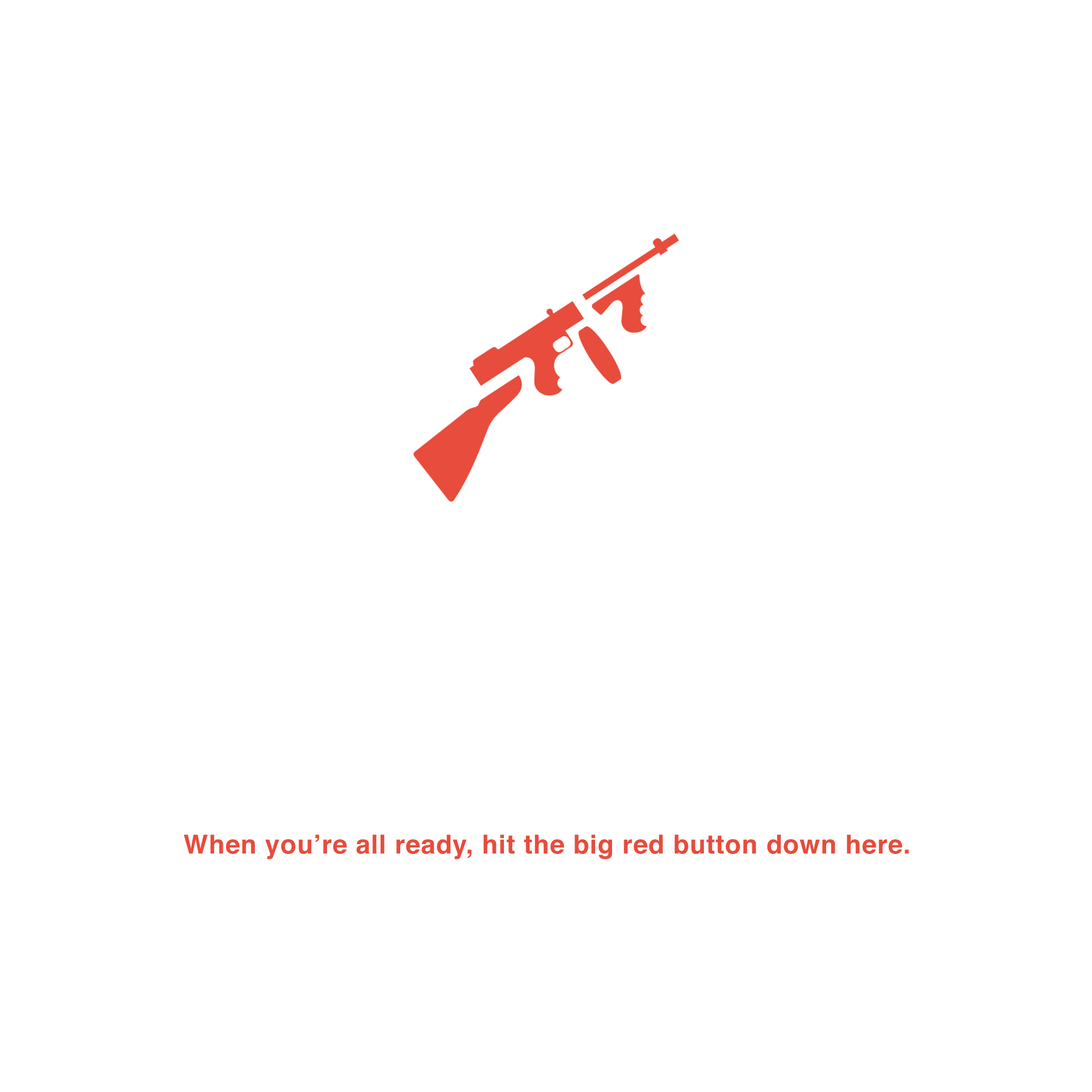
<style>
.page{position:relative;width:1092px;height:1092px;background:#ffffff}
.page>*{position:absolute;margin:0}
.t1{font:26.2px "Helvetica-Bold";letter-spacing:0.025em;color:#e74c3c}
.t2{font:26.2px "Helvetica-Bold";letter-spacing:0.025em;color:#ffffff}
.t3{font:26.2px "Helvetica";letter-spacing:0.025em;color:#ffffff}
</style>
<div class="page">
<p class="t1" style="left:167px;top:614px;width:759px;height:245px;text-align:center"><span class="t2">Stay quiet right now, though.</span><span class="t3"> Don’t want to ruin the surprise.<br></span><span class="t2">Make sure you study the names of everyone in this room.<br></span><span class="t3"><br>Together, you must eliminate all other players.<br></span><span class="t2">Grab a Sniper Rifle, gentlemen. You’ll need it.<br></span><span class="t3">You don’t want to be caught carrying them, though...<br><br></span>When you’re all ready, hit the big red button down here.</p>
</div>
